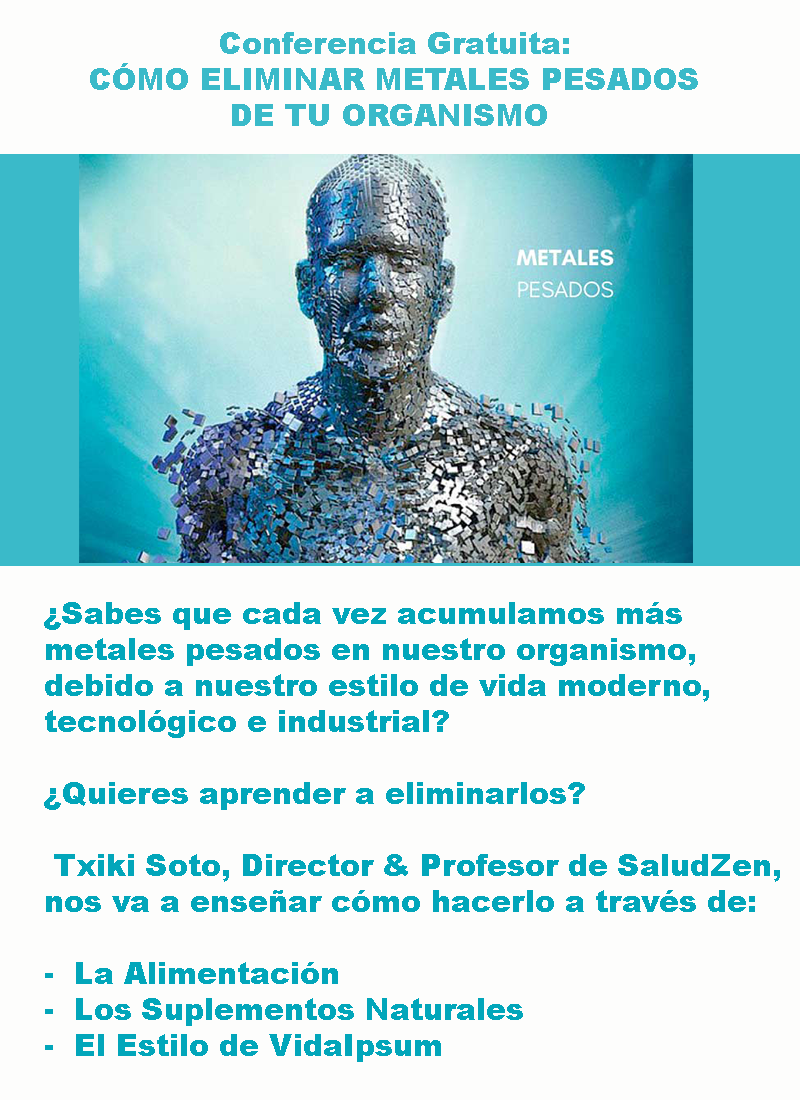
<style>
.page{position:relative;width:800px;height:1100px;background:#fdfdfc}
.page>*{position:absolute;margin:0}
.t1{font:30px "Arial-Black";color:#3abac9}
.t2{font:30px "Arial-Black";color:#02a6ba}
</style>
<div class="page">
<p class="t1" style="left:90px;top:32px;width:608px;height:94px;text-align:center">Conferencia Gratuita:<br> CÓMO ELIMINAR METALES PESADOS <br>DE TU ORGANISMO</p>
<p class="t2" style="left:44px;top:602px;width:736px;height:460px">¿Sabes que cada vez acumulamos más <br>metales pesados en nuestro organismo, <br>debido a nuestro estilo de vida moderno, <br>tecnológico e industrial? <br><br>¿Quieres aprender a eliminarlos?<br><br> Txiki Soto, Director &amp; Profesor de SaludZen, <br>nos va a enseñar cómo hacerlo a través de: <br><br>-  La Alimentación  <br>-  Los Suplementos Naturales <br>-  El Estilo de VidaIpsum</p>
</div>
